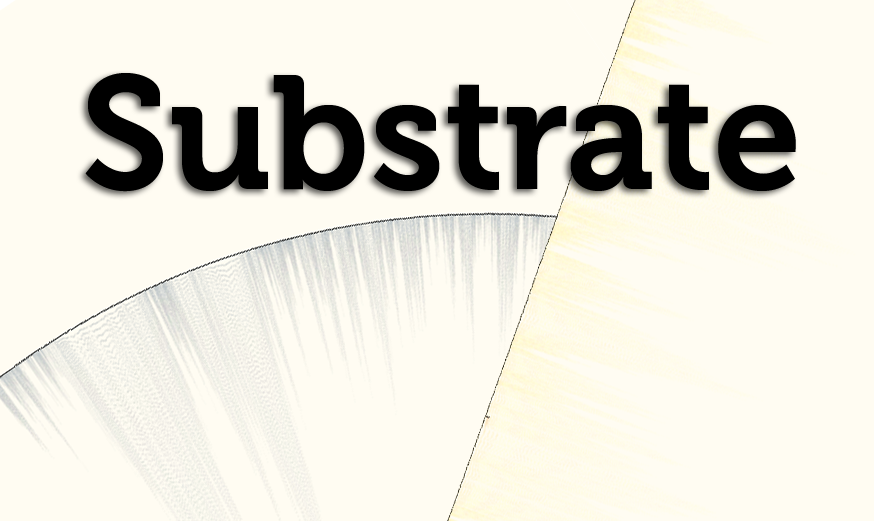
<style>
.page{position:relative;width:874px;height:521px;background:#fffcf2}
.page>*{position:absolute;margin:0}
.t1{font:160px "Museo-700";color:#000000}
</style>
<div class="page">
<p class="t1" style="left:85px;top:73px;width:711px;height:119px">Substrate</p>
</div>
